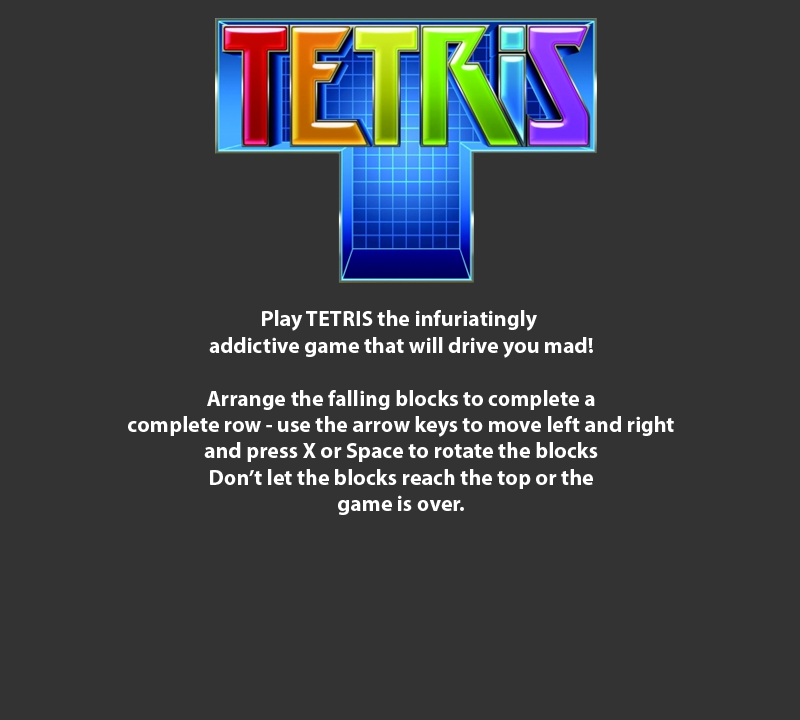
<style>
.page{position:relative;width:800px;height:720px;background:#333333}
.page>*{position:absolute;margin:0}
.t1{font:22px "MyriadPro-Bold";color:#ffffff}
</style>
<div class="page">
<p class="t1" style="left:128px;top:310px;width:546px;height:205px;text-align:center">Play TETRIS the infuriatingly <br>addictive game that will drive you mad!<br><br>Arrange the falling blocks to complete a<br>complete row - use the arrow keys to move left and right<br>and press X or Space to rotate the blocks<br>Don’t let the blocks reach the top or the<br>game is over.</p>
</div>
